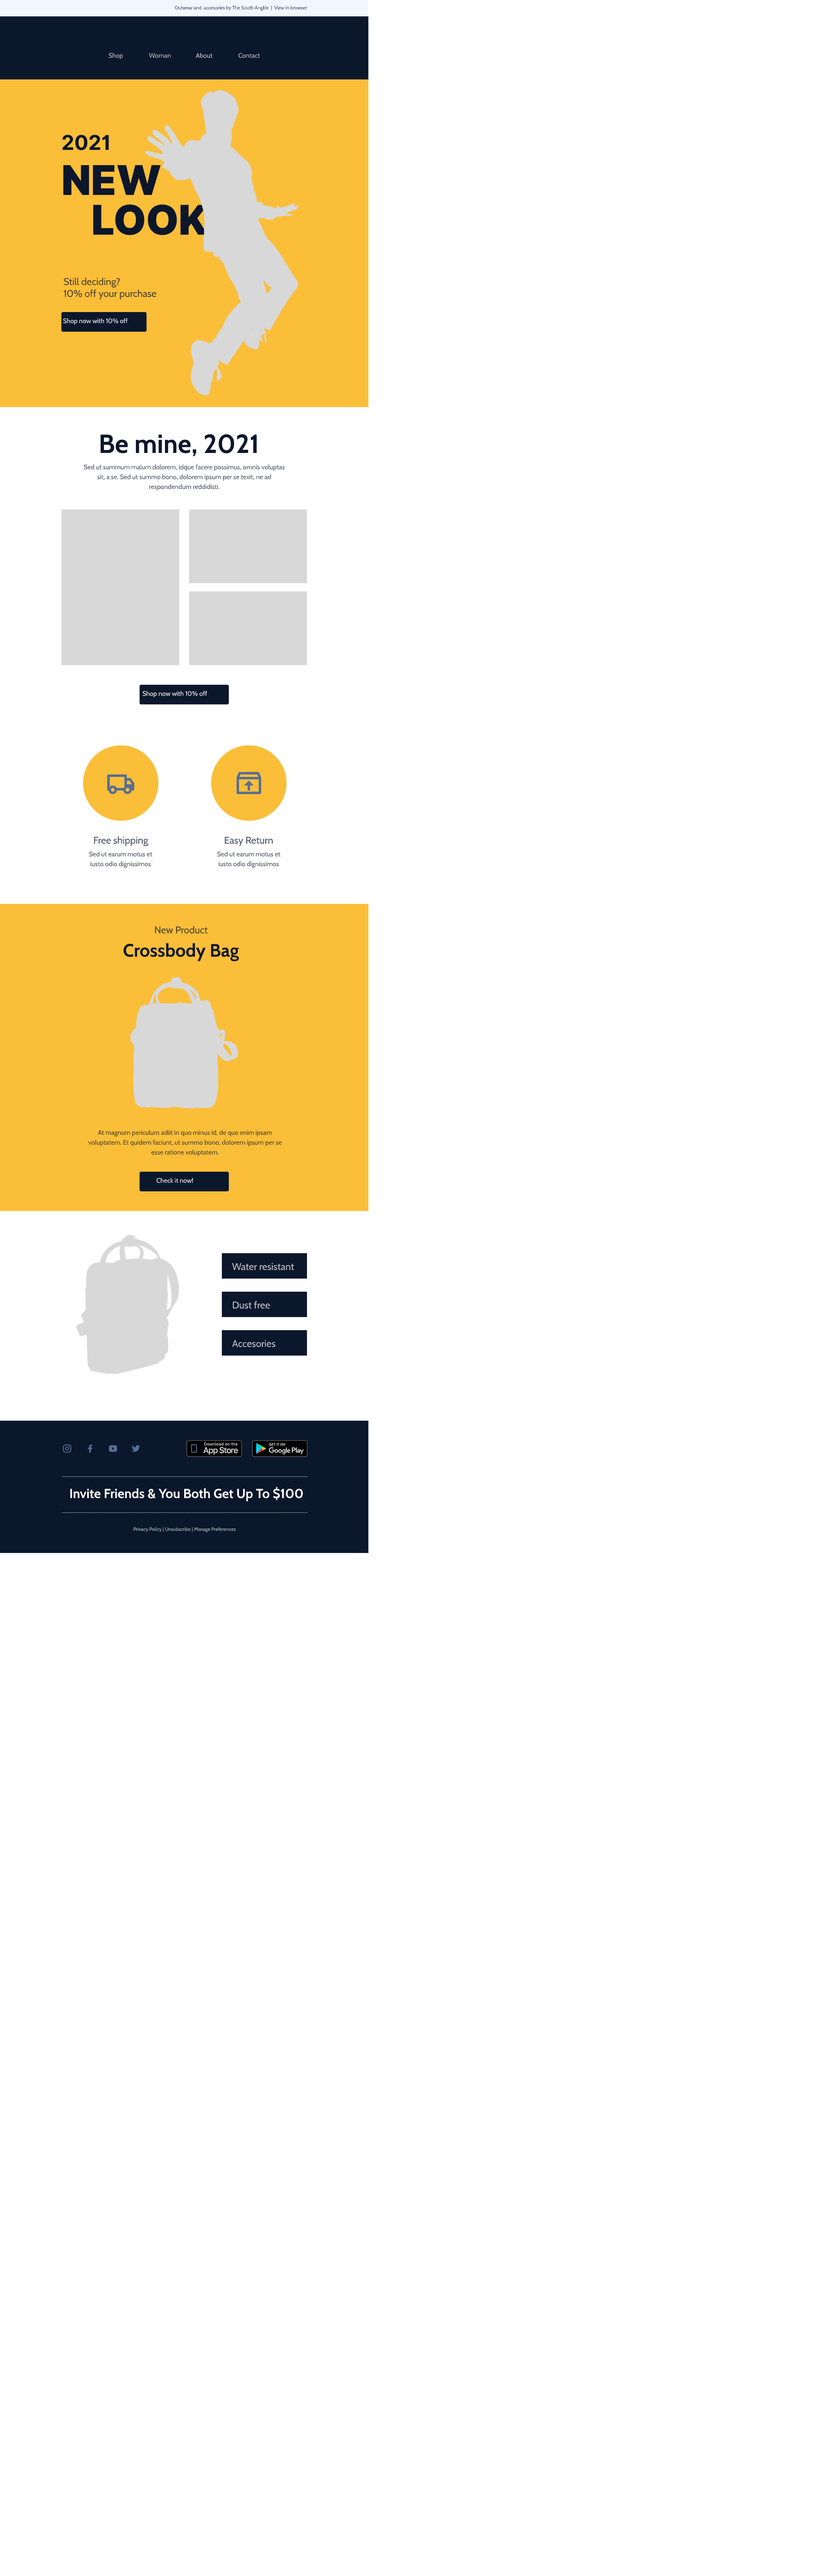
<style>
.page{position:relative;width:835px;height:2576px;background:#ffffff}
.page>*{position:absolute;margin:0}
.t1{font:4.9px "Cabin-Regular";color:#464f60}
.t2{font:6.6px "Cabin-Regular";color:#c2c5ca}
.t3{font:20.5px "Inter-Bold";color:#0c172b}
.t4{font:41px "Inter-Black";color:#0c172b}
.t5{font:9.8px "Cabin-Regular";color:#48412e}
.t6{font:6.6px "Cabin-Regular";color:#ffffff}
.t7{font:26.2px "Cabin-Bold";color:#0c172b}
.t8{font:6.6px/9.8px "Cabin-Regular";color:#495160}
.t9{font:9.8px "Cabin-Regular";color:#495160}
.t10{font:18px "Cabin-Bold";color:#0c172b}
.t11{font:6.6px/9.8px "Cabin-Regular";color:#48412e}
.t12{font:9.8px "Cabin-Regular";color:#c2c5ca}
.t13{font:13.1px "Cabin-Bold";color:#ffffff}
.t14{font:4.9px "Cabin-Regular";color:#c2c5ca}
</style>
<div class="page">
<p class="t1" style="left:175px;top:6px;width:132px;height:5px">Outwear and  accesories by The South Angkle  |  View in browser</p>
<p class="t2" style="left:109px;top:53px;width:14px;height:6px">Shop</p>
<p class="t2" style="left:149px;top:53px;width:22px;height:5px">Woman</p>
<p class="t2" style="left:196px;top:53px;width:17px;height:5px">About</p>
<p class="t2" style="left:238px;top:53px;width:22px;height:5px">Contact</p>
<p class="t3" style="left:62px;top:135px;width:47px;height:15px">2021</p>
<p class="t4" style="left:63px;top:165px;width:98px;height:30px">NEW</p>
<p class="t4" style="left:93px;top:204px;width:115px;height:31px">LOOK</p>
<p class="t5" style="left:63px;top:278px;width:93px;height:21px">Still deciding?<br>10% off your purchase</p>
<p class="t6" style="left:63px;top:318px;width:65px;height:7px">Shop now with 10% off</p>
<p class="t7" style="left:100px;top:434px;width:157px;height:22px">Be mine, 2021</p>
<p class="t8" style="left:84px;top:464px;width:201px;height:27px;text-align:center">Sed ut summum malum dolorem, idque facere possimus, omnis voluptas sit, a se. Sed ut summo bono, dolorem ipsum per se texit, ne ad respondendum reddidisti.</p>
<p class="t6" style="left:143px;top:691px;width:65px;height:6px">Shop now with 10% off</p>
<p class="t9" style="left:94px;top:836px;width:55px;height:10px">Free shipping</p>
<p class="t9" style="left:225px;top:837px;width:48px;height:9px">Easy Return</p>
<p class="t8" style="left:89px;top:851px;width:63px;height:17px;text-align:center">Sed ut earum motus et iusto odio dignissimos</p>
<p class="t8" style="left:217px;top:851px;width:64px;height:17px;text-align:center">Sed ut earum motus et iusto odio dignissimos</p>
<p class="t5" style="left:155px;top:926px;width:53px;height:8px">New Product</p>
<p class="t10" style="left:123px;top:943px;width:116px;height:19px">Crossbody Bag</p>
<p class="t11" style="left:88px;top:1130px;width:194px;height:26px;text-align:center">At magnum periculum adiit in quo minus id, de quo enim ipsam voluptatem. Et quidem faciunt, ut summo bono, dolorem ipsum per se esse ratione voluptatem.</p>
<p class="t6" style="left:156px;top:1178px;width:37px;height:5px">Check it now!</p>
<p class="t12" style="left:232px;top:1263px;width:62px;height:7px">Water resistant</p>
<p class="t12" style="left:233px;top:1301px;width:37px;height:8px">Dust free</p>
<p class="t12" style="left:232px;top:1340px;width:44px;height:7px">Accesories</p>
<p class="t13" style="left:70px;top:1487px;width:233px;height:14px">Invite Friends &amp; You Both Get Up To $100</p>
<p class="t14" style="left:134px;top:1527px;width:102px;height:5px">Privacy Policy | Unsubscribe | Manage Preferences</p>
</div>
